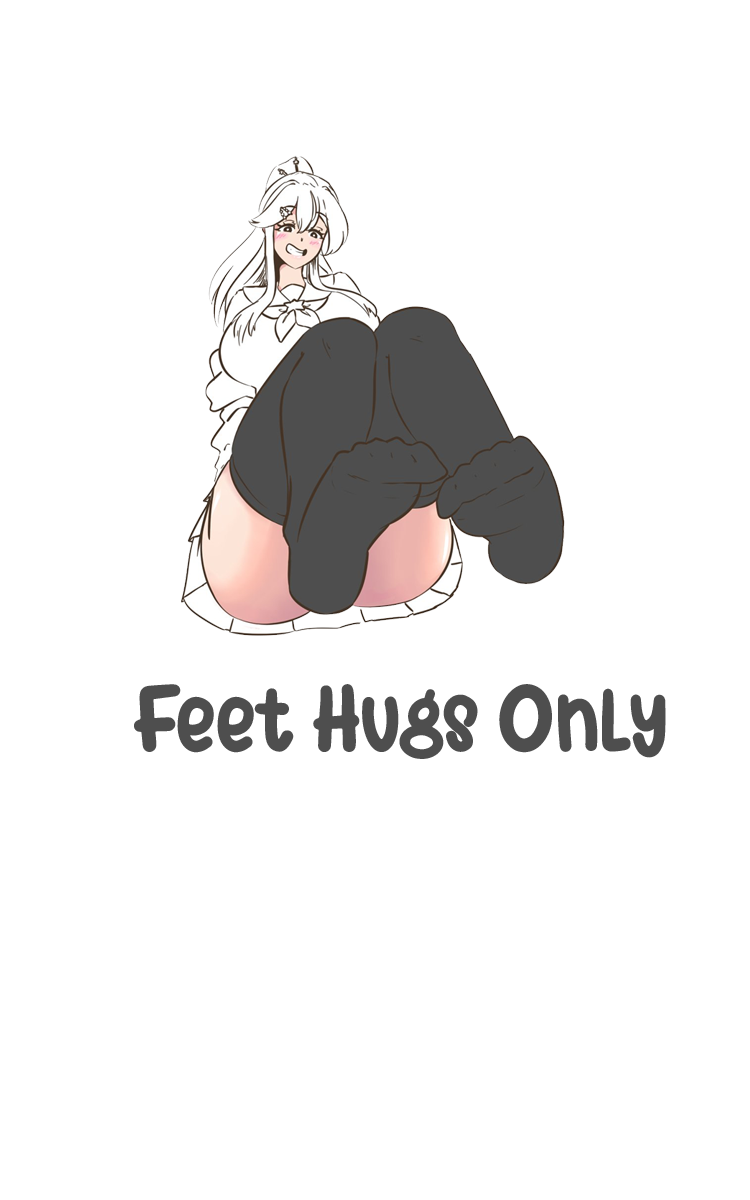
<style>
.page{position:relative;width:750px;height:1200px;background:#ffffff}
.page>*{position:absolute;margin:0}
.t1{font:99.8px "SpringBubbles";color:#4e4e4e}
</style>
<div class="page">
<p class="t1" style="left:134px;top:684px;width:532px;height:75px">Feet Hugs Only</p>
</div>
